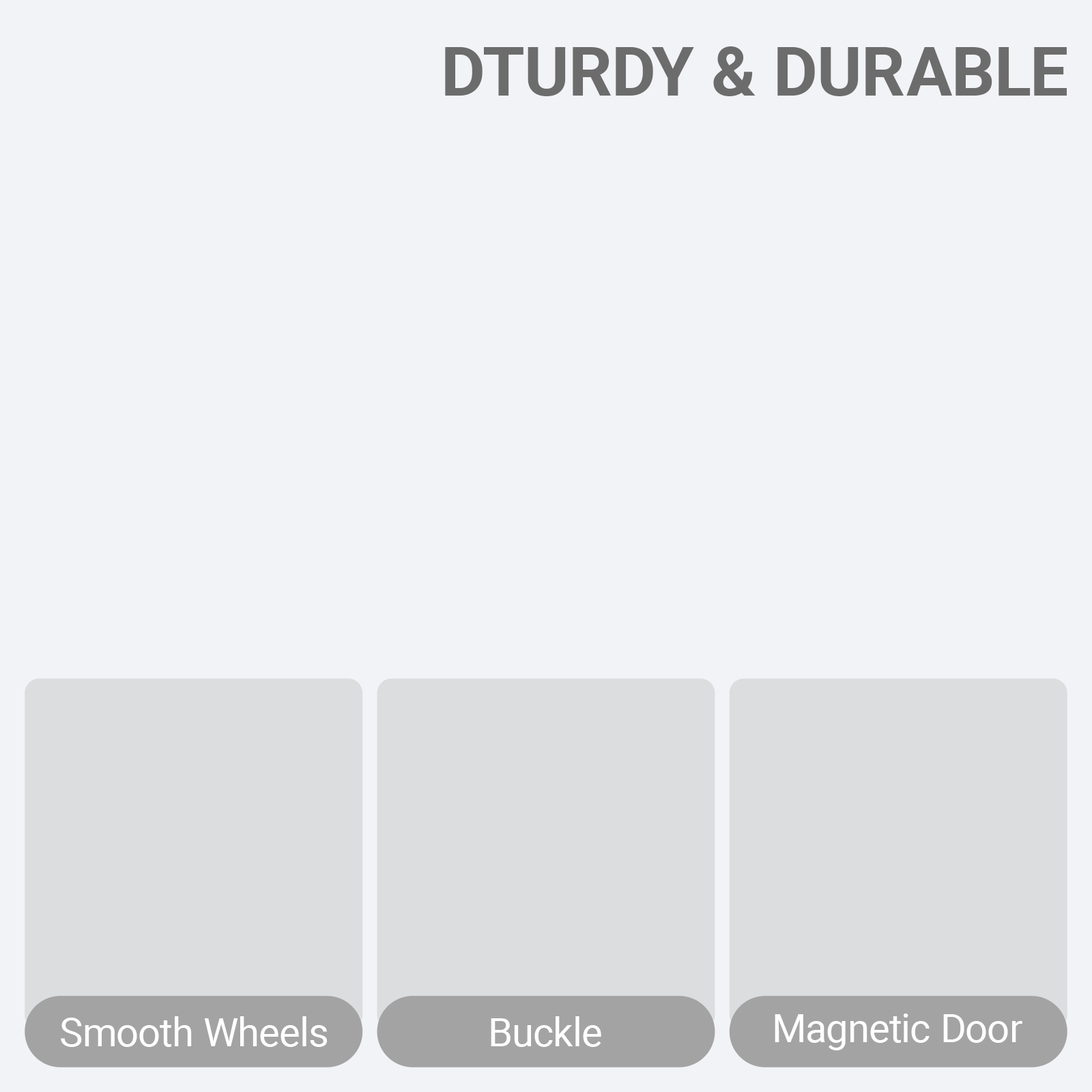
<style>
.page{position:relative;width:1092px;height:1092px;background:#f2f3f6}
.page>*{position:absolute;margin:0}
.t1{font:68.4px "Roboto-Bold";color:#6c6c6c}
.t2{font:39.3px "Roboto-Regular";color:#ffffff}
</style>
<div class="page">
<p class="t1" style="left:445px;top:46px;width:622px;height:50px">DTURDY &amp; DURABLE</p>
<p class="t2" style="left:775px;top:1013px;width:247px;height:37px">Magnetic Door</p>
<p class="t2" style="left:61px;top:1016px;width:266px;height:31px">Smooth Wheels</p>
<p class="t2" style="left:491px;top:1016px;width:110px;height:31px">Buckle</p>
</div>
